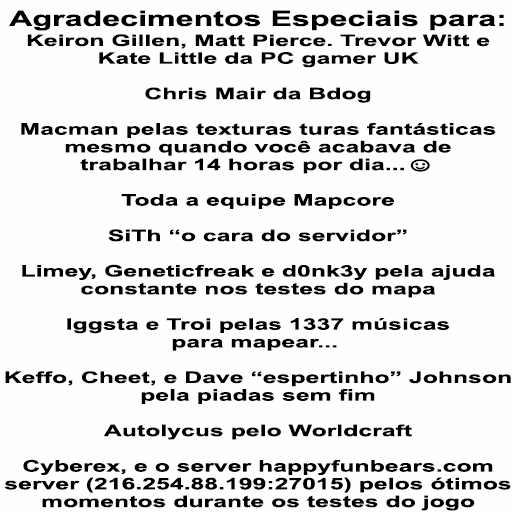
<style>
.page{position:relative;width:512px;height:512px;background:#fefefe}
.page>*{position:absolute;margin:0}
.t1{font:21.3px "Arial-BoldMT";color:#000000;scale:1.51 1}
.t2{font:16px/17.7px "Arial-BoldMT";color:#000000;scale:1.55 1}
.t3{font:18.7px/17.7px "Arial-BoldMT";color:#000000;font-weight:bold;scale:1.55 1}
</style>
<div class="page">
<p class="t1" style="left:9px;top:10px;width:495px;height:21px">Agradecimentos Especiais para:</p>
<p class="t2" style="left:4px;top:34px;width:507px;height:477px;text-align:center">Keiron Gillen, Matt Pierce. Trevor Witt e<br>Kate Little da PC gamer UK<br><br>Chris Mair da Bdog<br><br>Macman pelas texturas turas fantásticas<br>mesmo quando você acabava de<br>trabalhar 14 horas por dia...<span class="t3">☺<br></span><br>Toda a equipe Mapcore<br><br>SiTh “o cara do servidor”<br><br>Limey, Geneticfreak e d0nk3y pela ajuda<br>constante nos testes do mapa<br><br>Iggsta e Troi pelas 1337 músicas<br>para mapear... <br><br>Keffo, Cheet, e Dave “espertinho” Johnson<br>pela piadas sem fim<br><br>Autolycus pelo Worldcraft<br><br>Cyberex, e o server happyfunbears.com<br>server (216.254.88.199:27015) pelos ótimos<br>momentos durante os testes do jogo</p>
</div>
